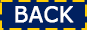
<style>
.page{position:relative;width:87px;height:30px;background:#002060}
.page>*{position:absolute;margin:0}
.t1{font:21px "Verdana";color:#ffffff;font-weight:bold}
</style>
<div class="page">
<p class="t1" style="left:15px;top:6px;width:59px;height:17px">BACK</p>
</div>
